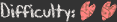
<style>
.page{position:relative;width:117px;height:22px;background:#333333}
.page>*{position:absolute;margin:0}
.t1{font:20px "DJBChalkItUp"}
</style>
<div class="page">
<p class="t1" style="left:0px;top:2px;width:75px;height:20px">Difficulty:</p>
</div>
